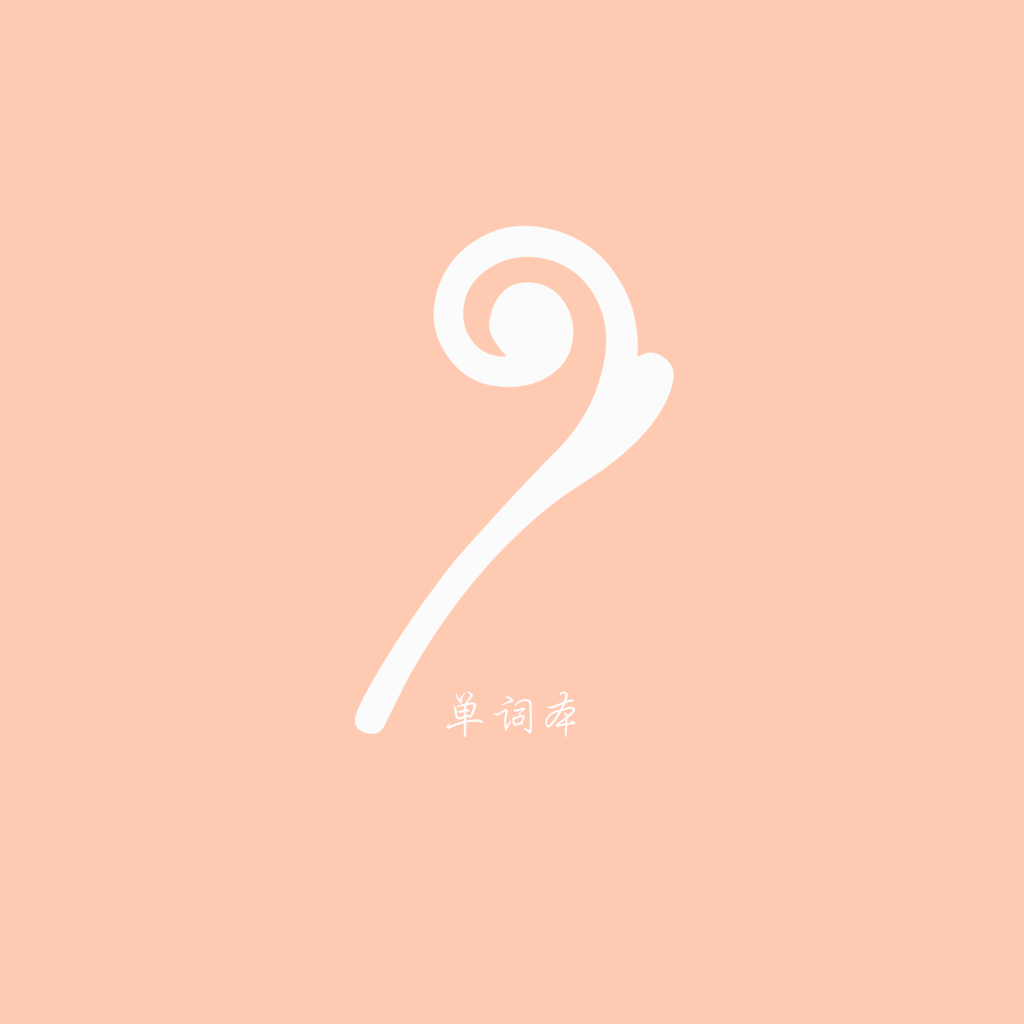
<style>
.page{position:relative;width:1024px;height:1024px;background:#ffcab2}
.page>*{position:absolute;margin:0}
.t1{font:48px "STXingkaiSC-Light";color:#fbfbfb;font-weight:bold}
</style>
<div class="page">
<p class="t1" style="left:446px;top:691px;width:130px;height:47px">单词本</p>
</div>
